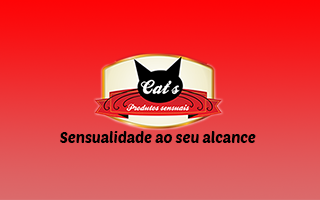
<style>
.page{position:relative;width:320px;height:200px}
.page>*{position:absolute;margin:0}
.t1{font:14.9px "PoetsenOne-Regular";color:#000000}
</style>
<div class="page">
<p class="t1" style="left:60px;top:131px;width:196px;height:12px">Sensualidade ao seu alcance</p>
</div>
